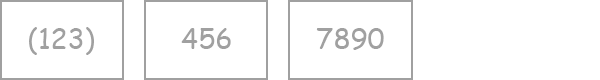
<style>
.page{position:relative;width:600px;height:80px;background:#ffffff}
.page>*{position:absolute;margin:0}
.t1{font:28px "ComicSansMS";color:#a0a0a0}
</style>
<div class="page">
<p class="t1" style="left:29px;top:27px;width:65px;height:28px">(123)</p>
<p class="t1" style="left:181px;top:28px;width:50px;height:21px">456</p>
<p class="t1" style="left:316px;top:28px;width:68px;height:22px">7890</p>
</div>
